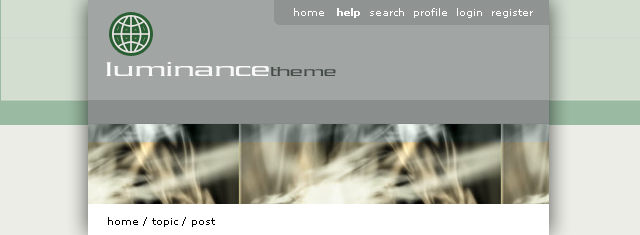
<style>
.page{position:relative;width:640px;height:235px;background:#a1a5a3}
.page>*{position:absolute;margin:0}
.t1{font:10px "Verdana";color:#ffffff}
.t2{font:10px "Verdana-Bold";color:#ffffff}
.t3{font:23.2px "Vibrocentric";color:#f8f8f8}
.t4{font:23.2px "Vibrocentric";color:#ffffff}
.t5{font:15.4px "Vibrocentric";color:#434c47}
.t6{font:10px "Verdana";color:#000000}
</style>
<div class="page">
<p class="t1" style="left:294px;top:8px;width:239px;height:10px">home   <span class="t2">help</span>  search  profile  login  register</p>
<p class="t3" style="left:106px;top:62px;width:230px;height:14px"><span class="t4">l</span>uminance<span class="t5">theme</span></p>
<p class="t6" style="left:108px;top:217px;width:107px;height:10px">home / topic / post</p>
</div>
